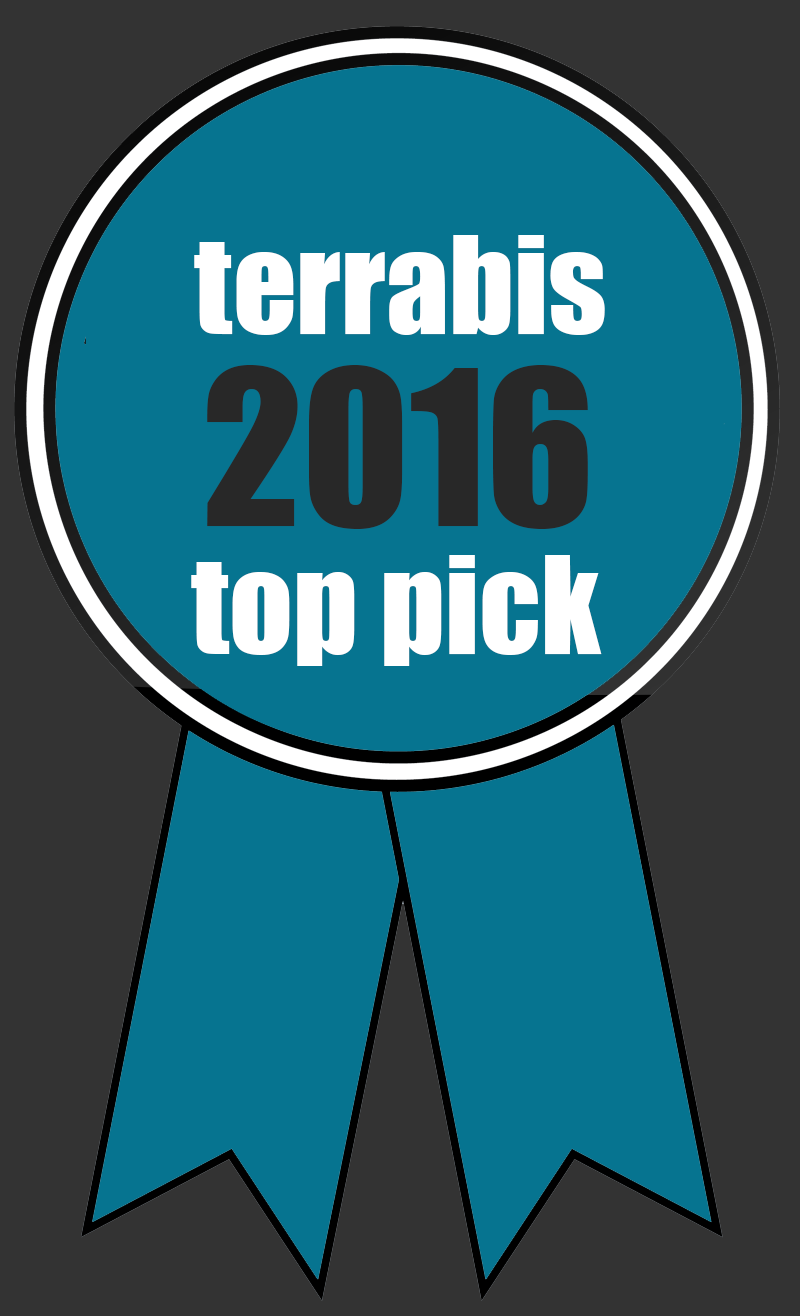
<style>
.page{position:relative;width:800px;height:1316px;background:#067490}
.page>*{position:absolute;margin:0}
.t1{font:125px "Impact";color:#ffffff}
.t2{font:200px "Impact";color:#282828}
</style>
<div class="page">
<p class="t1" style="left:194px;top:235px;width:411px;height:100px">terrabis</p>
<p class="t2" style="left:207px;top:365px;width:381px;height:164px">2016</p>
<p class="t1" style="left:191px;top:555px;width:411px;height:111px">top pick</p>
</div>
